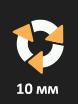
<style>
.page{position:relative;width:78px;height:104px;background:#202020}
.page>*{position:absolute;margin:0}
.t1{font:12px "Calibri-Bold";color:#ffffff}
</style>
<div class="page">
<p class="t1" style="left:17px;top:83px;width:41px;height:11px">10 мм</p>
</div>
